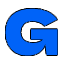
<style>
.page{position:relative;width:64px;height:64px;background:#ffffff}
.page>*{position:absolute;margin:0}
.t1{font:62px "DelaGothicOne-Regular";color:#0063f8}
</style>
<div class="page">
<p class="t1" style="left:5px;top:8px;width:53px;height:48px">G</p>
</div>
